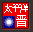
<style>
.page{position:relative;width:33px;height:32px;background:#f20000}
.page>*{position:absolute;margin:0}
.t1{font:10.4px "SimSun";letter-spacing:-0.25em;color:#ffffff}
.t2{font:11.7px "SimSun";color:#ffffff}
</style>
<div class="page">
<p class="t1" style="left:4px;top:4px;width:24px;height:9px">太平洋</p>
<p class="t2" style="left:16px;top:15px;width:11px;height:12px">晋</p>
</div>
